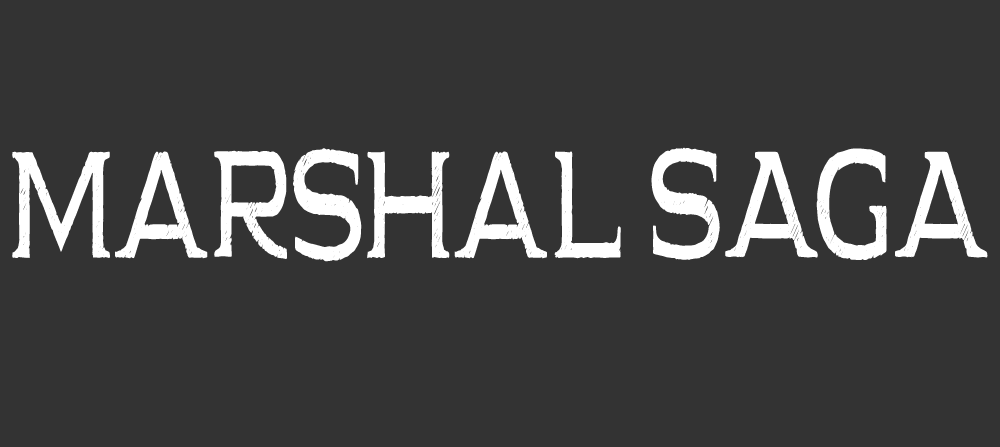
<style>
.page{position:relative;width:1000px;height:447px;background:#333333}
.page>*{position:absolute;margin:0}
.t1{font:243.1px "PauraqueSerifRough-Regular";color:#ffffff;scale:0.45 1}
</style>
<div class="page">
<p class="t1" style="left:12px;top:147px;width:976px;height:115px">Marshal SAGA</p>
</div>
